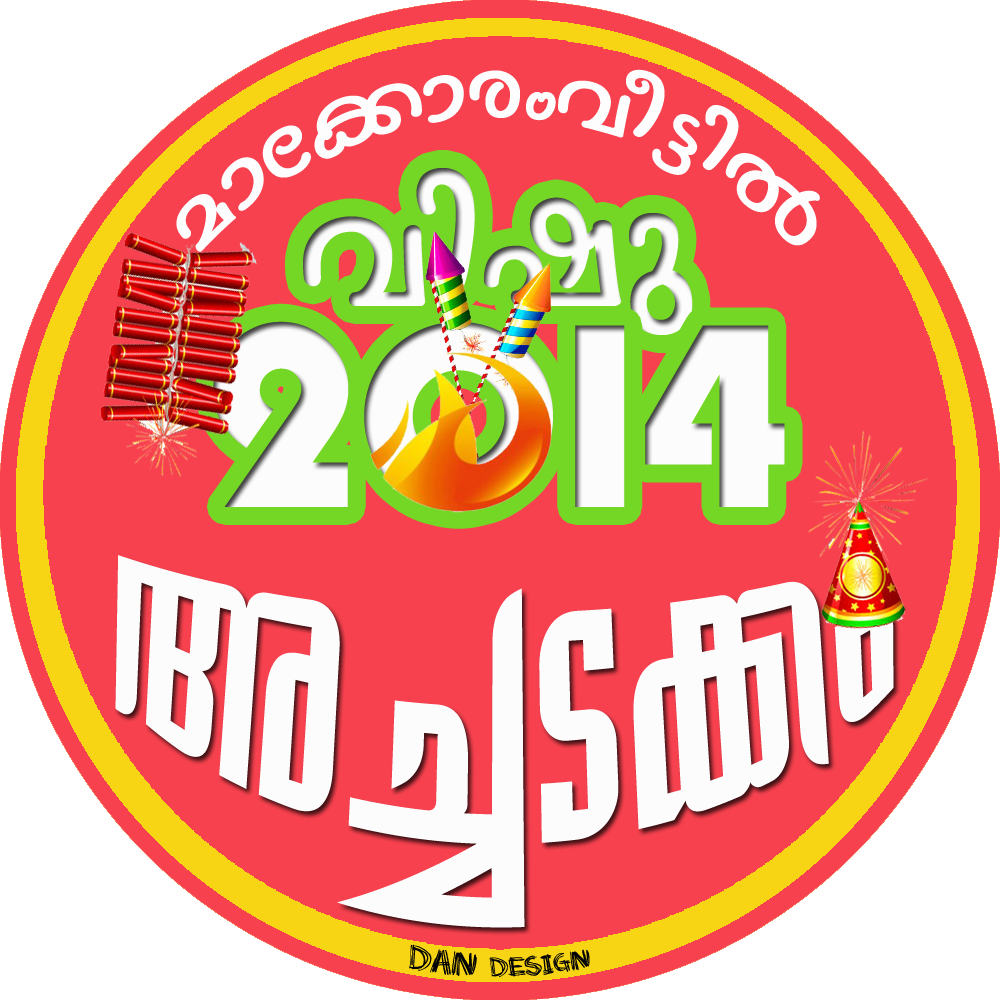
<style>
.page{position:relative;width:1000px;height:1000px;background:#f7414e}
.page>*{position:absolute;margin:0}
.t1{font:109.6px "FML-Nanditha";color:#fdfdfd;scale:0.9 1}
.t2{font:211.8px "FML-Nanditha";color:#fcfcfc}
.t3{font:272.3px "PumpDemiBoldLetPlain";color:#fcfcfc}
.t4{font:286.8px "FML-TTGauri-Bold";letter-spacing:0.01em;color:#fcfcfc;scale:1.15 1}
.t5{font:19.4px "Scratchmyback";color:#030303}
.t6{font:24.3px "Scratchmyback";color:#030303}
</style>
<div class="page">
<p class="t1" style="left:176px;top:69px;width:644px;height:183px">amt¡mcwho«nÂ</p>
<p class="t2" style="left:303px;top:168px;width:390px;height:167px">hnjp</p>
<p class="t3" style="left:213px;top:321px;width:572px;height:190px">2014</p>
<p class="t4" style="left:115px;top:555px;width:779px;height:373px">A¨S¡w</p>
<p class="t5" style="left:409px;top:944px;width:181px;height:33px"><span class="t6">Dan </span>Design</p>
</div>
